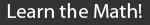
<style>
.page{position:relative;width:150px;height:25px;background:#333333}
.page>*{position:absolute;margin:0}
.t1{font:20.8px "MyriadPro-Regular";color:#fdffff}
</style>
<div class="page">
<p class="t1" style="left:7px;top:3px;width:135px;height:15px">Learn the Math!</p>
</div>
